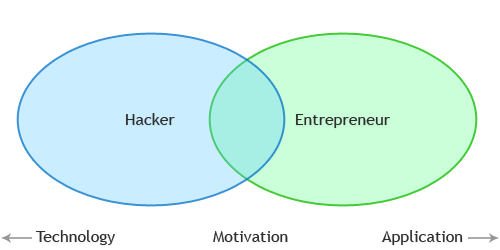
<style>
.page{position:relative;width:500px;height:250px;background:#ffffff}
.page>*{position:absolute;margin:0}
.t1{font:16px "TrebuchetMS";color:#2d2d2d}
</style>
<div class="page">
<p class="t1" style="left:126px;top:113px;width:49px;height:12px">Hacker</p>
<p class="t1" style="left:296px;top:114px;width:94px;height:14px">Entrepreneur</p>
<p class="t1" style="left:36px;top:230px;width:79px;height:15px">Technology</p>
<p class="t1" style="left:213px;top:231px;width:75px;height:11px">Motivation</p>
<p class="t1" style="left:382px;top:230px;width:81px;height:15px">Application</p>
</div>
